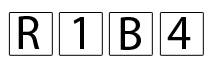
<style>
.page{position:relative;width:211px;height:69px;background:#ffffff}
.page>*{position:absolute;margin:0}
.t1{font:48px "MyriadPro-Regular";color:#000000}
</style>
<div class="page">
<p class="t1" style="left:18px;top:16px;width:22px;height:33px">R</p>
<p class="t1" style="left:73px;top:17px;width:11px;height:32px">1</p>
<p class="t1" style="left:120px;top:17px;width:21px;height:33px">B</p>
<p class="t1" style="left:167px;top:17px;width:24px;height:32px">4</p>
</div>
